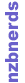
<style>
.page{position:relative;width:25px;height:83px;background:#ffffff}
.page>*{position:absolute;margin:0}
.t1{font:18px "Arial-Black";color:#6a60cb;scale:0.91 1}
</style>
<div class="page">
<p class="t1" style="left:5px;top:1px;width:14px;height:81px;rotate:-90deg">nzbnerds</p>
</div>
